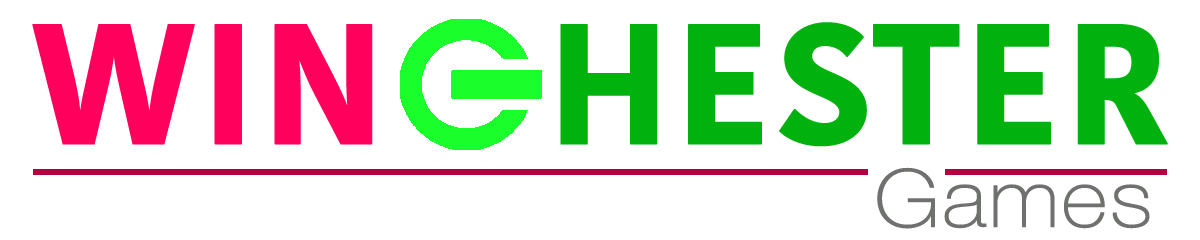
<style>
.page{position:relative;width:1200px;height:240px;background:#ffffff}
.page>*{position:absolute;margin:0}
.t1{font:170px "KohinoorBangla-Bold";letter-spacing:0.001em;color:#01b20e;font-weight:bold}
.t2{font:170px "KohinoorBangla-Bold";letter-spacing:0.001em;color:#ff015d;font-weight:bold}
.t3{font:80px "HelveticaNeue-Thin";letter-spacing:0.001em;color:#6f716f;font-weight:bold;scale:1.1 1}
</style>
<div class="page">
<p class="t1" style="left:32px;top:22px;width:1136px;height:125px"><span class="t2">WIN   </span>HESTER</p>
<p class="t3" style="left:877px;top:167px;width:273px;height:62px">Games</p>
</div>
